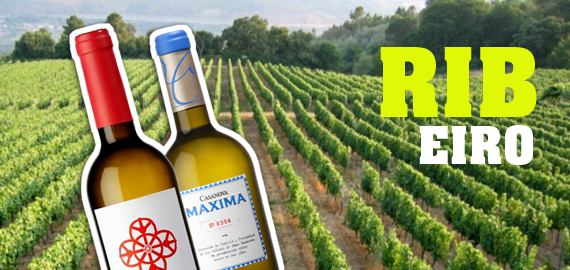
<style>
.page{position:relative;width:570px;height:270px}
.page>*{position:absolute;margin:0}
.t1{font:82px "AachenStd-Bold";letter-spacing:0.025em;color:#def806}
.t2{font:44px "AachenStd-Bold";letter-spacing:0.025em;color:#ffffff}
</style>
<div class="page">
<p class="t1" style="left:380px;top:47px;width:157px;height:70px">RIB</p>
<p class="t2" style="left:419px;top:125px;width:114px;height:40px">EIRO</p>
</div>
